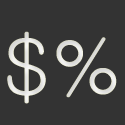
<style>
.page{position:relative;width:125px;height:125px;background:#333333}
.page>*{position:absolute;margin:0}
.t1{font:80px "Gulim";color:#e3e3e0}
</style>
<div class="page">
<p class="t1" style="left:7px;top:31px;width:110px;height:73px">$%</p>
</div>
